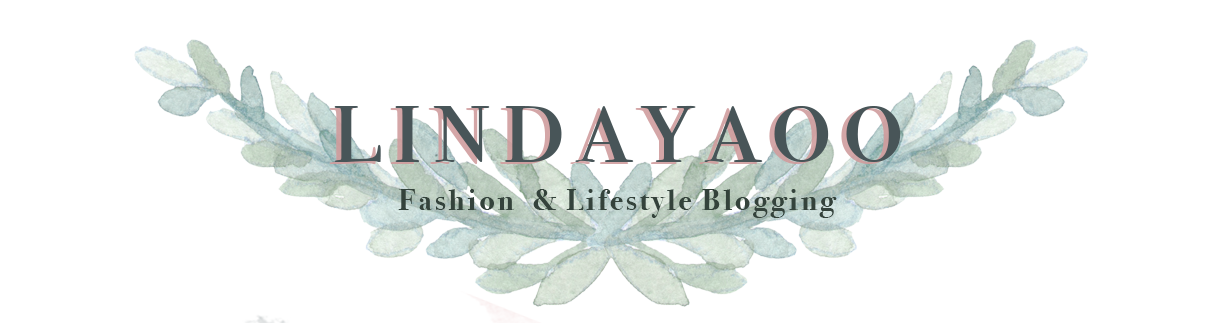
<style>
.page{position:relative;width:1228px;height:323px;background:#ffffff}
.page>*{position:absolute;margin:0}
.t1{font:120px "BodoniSvtyTwoSCITCTT-Book";letter-spacing:0.1em}
.t2{font:120px "BodoniSvtyTwoSCITCTT-Book";letter-spacing:0.1em;color:#485558}
.t3{font:30px "BodoniSvtyTwoITCTT-Bold";letter-spacing:0.1em;color:#34423b}
</style>
<div class="page">
<p class="t1" style="left:329px;top:107px;width:567px;height:57px">lindayaoo</p>
<p class="t2" style="left:334px;top:105px;width:567px;height:57px">lindayaoo</p>
<p class="t3" style="left:398px;top:189px;width:439px;height:29px">Fashion  &amp; Lifestyle Blogging</p>
</div>
